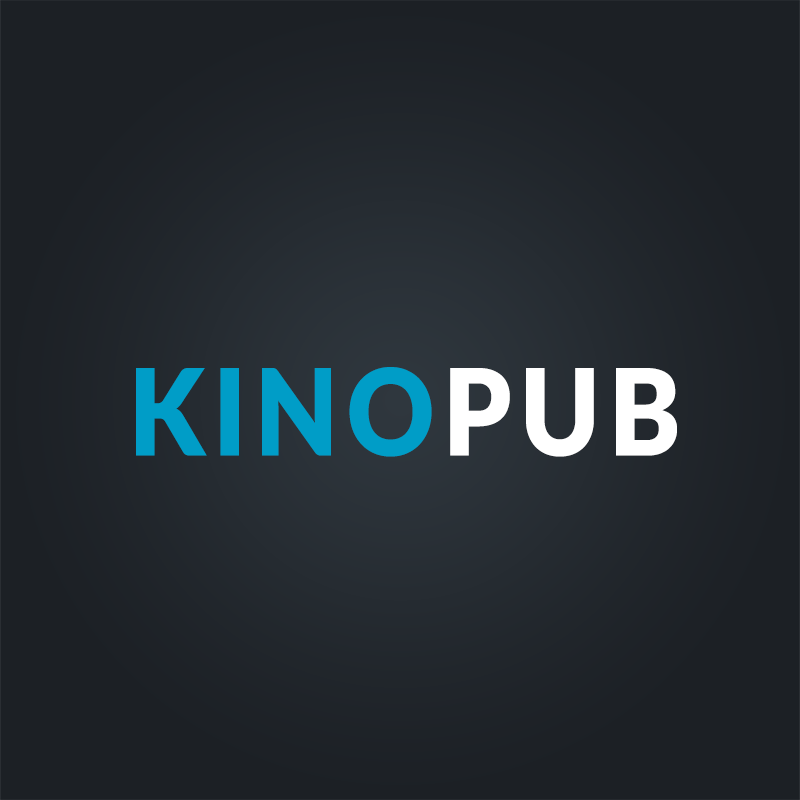
<style>
.page{position:relative;width:800px;height:800px;background:#1c2025}
.page>*{position:absolute;margin:0}
.t1{font:120px "LatoLatin-Black";letter-spacing:0.075em;color:#009dc7;scale:0.9 1}
.t2{font:120px "LatoLatin-Black";letter-spacing:0.075em;color:#ffffff;scale:0.9 1}
</style>
<div class="page">
<p class="t1" style="left:136px;top:367px;width:541px;height:90px">KINO<span class="t2">PUB</span></p>
</div>
